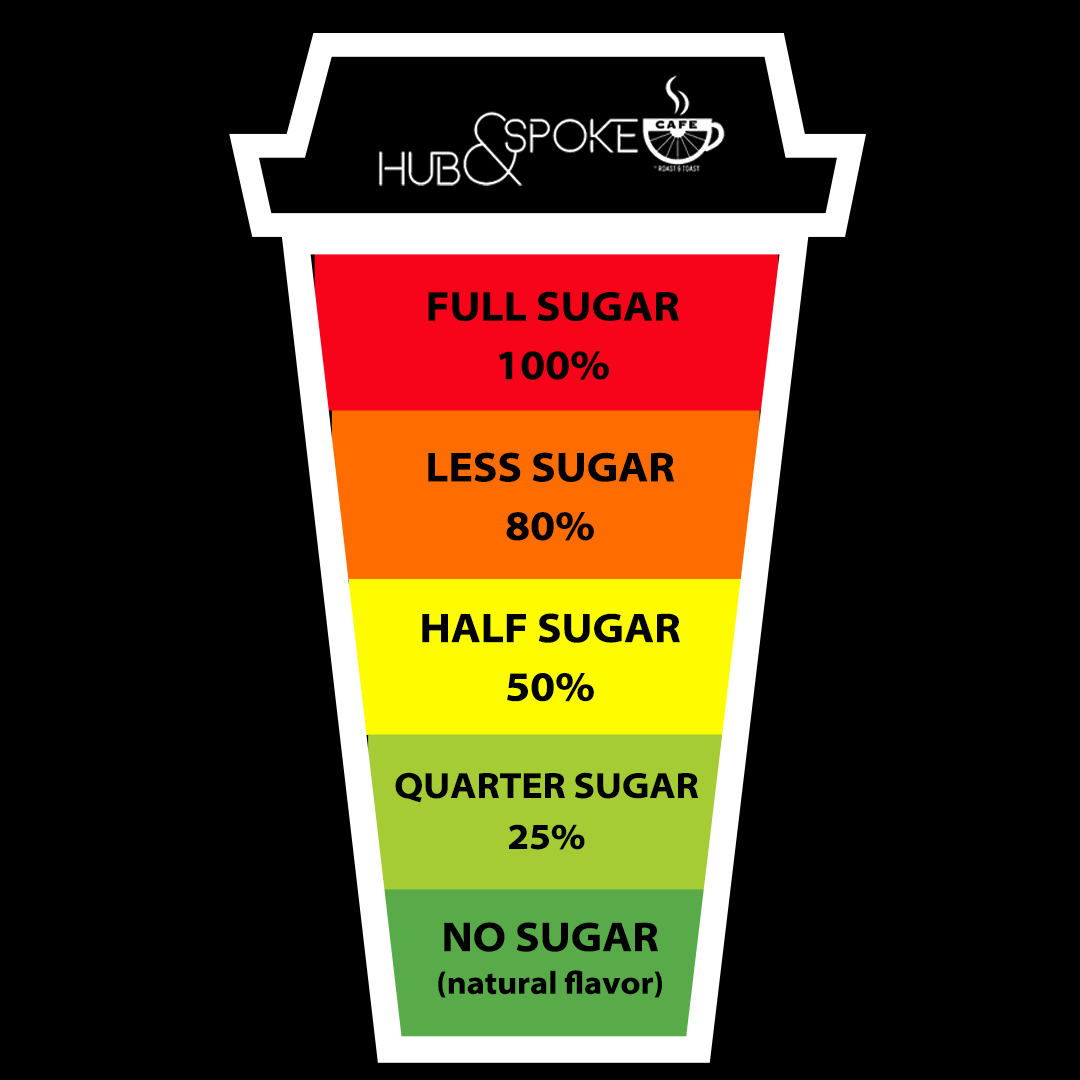
<style>
.page{position:relative;width:1080px;height:1080px;background:#000000}
.page>*{position:absolute;margin:0}
.t1{font:41.8px/58.5px "MyriadConceptRoman-BoldSemiExtended";color:#000000}
.t2{font:36.4px/51px "MyriadConceptRoman-BoldSemiExtended";color:#000000}
.t3{font:31.9px/42.6px "MyriadConceptRoman-BoldSemiExtended";color:#000000}
.t4{font:41.8px/42.6px "MyriadConceptRoman-BoldSemiExtended";color:#000000}
</style>
<div class="page">
<p class="t1" style="left:428px;top:291px;width:251px;height:89px;text-align:center">FULL SUGAR<br>100%</p>
<p class="t1" style="left:428px;top:452px;width:247px;height:89px;text-align:center">LESS SUGAR<br>80%</p>
<p class="t1" style="left:422px;top:613px;width:258px;height:89px;text-align:center">HALF SUGAR<br>50%</p>
<p class="t2" style="left:395px;top:772px;width:304px;height:78px;text-align:center">QUARTER SUGAR<br>25%</p>
<p class="t3" style="left:438px;top:922px;width:224px;height:76px;text-align:center"><span class="t4">NO SUGAR<br></span>(natural flavor)</p>
</div>
